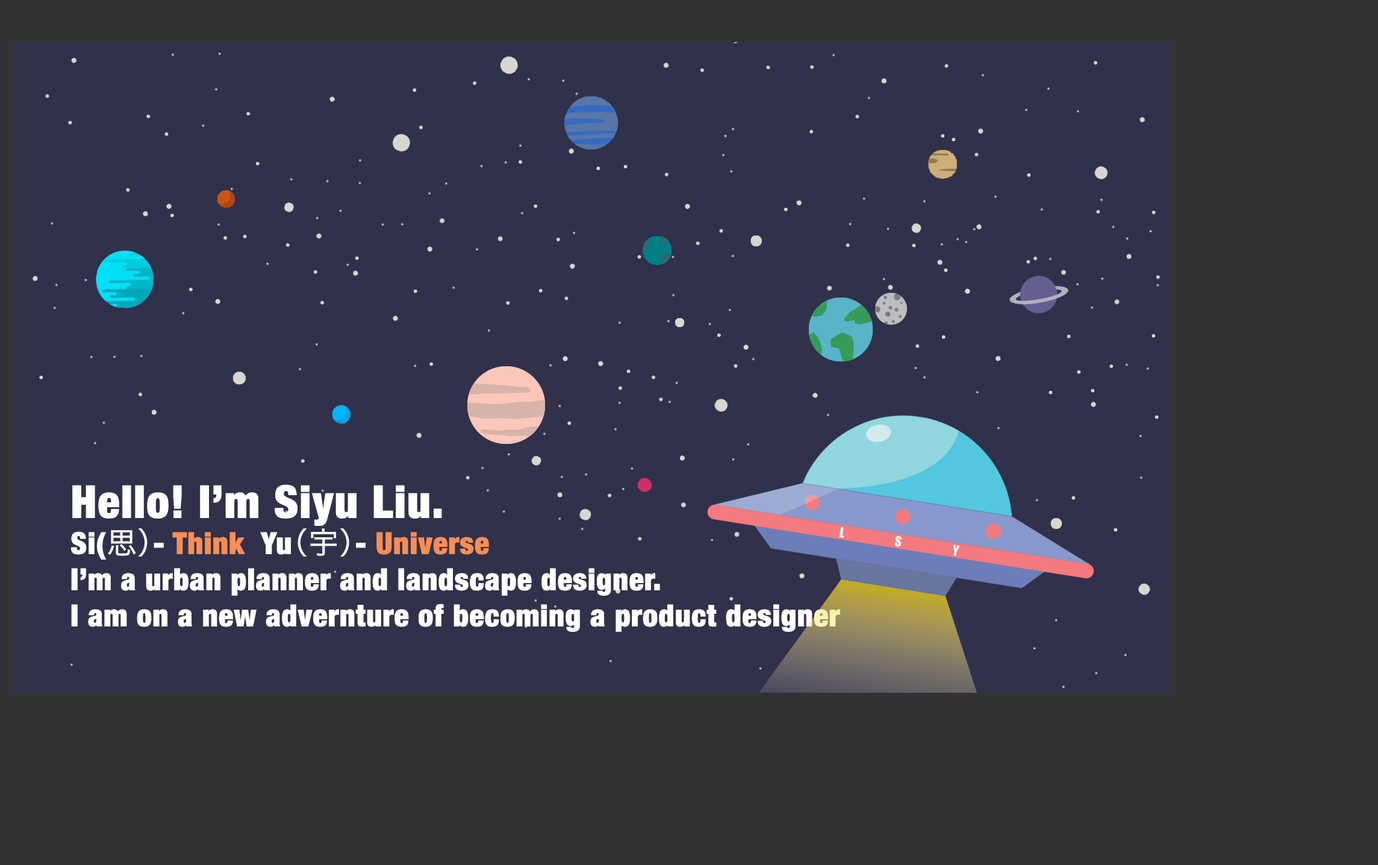
<style>
.page{position:relative;width:1378px;height:865px;background:#31314b}
.page>*{position:absolute;margin:0}
.t1{font:30.1px "HelveticaNeue-CondensedBlack";color:#ffffff;font-weight:bold}
.t2{font:45.2px "HelveticaNeue-CondensedBlack";color:#ffffff;font-weight:bold}
.t3{font:30.1px "HiraKakuProN-W3";color:#ffffff;font-weight:bold}
.t4{font:30.1px "HelveticaNeue-CondensedBlack";color:#f68e56;font-weight:bold}
</style>
<div class="page">
<p class="t1" style="left:71px;top:484px;width:769px;height:148px"><span class="t2">Hello! I’m Siyu Liu. <br></span>Si(<span class="t3">思）</span>- <span class="t4">Think</span>  Yu<span class="t3">（宇）</span>-<span class="t4"> Universe </span>                     <br>I’m a urban planner and landscape designer.<br>I am on a new advernture of becoming a product designer</p>
</div>
